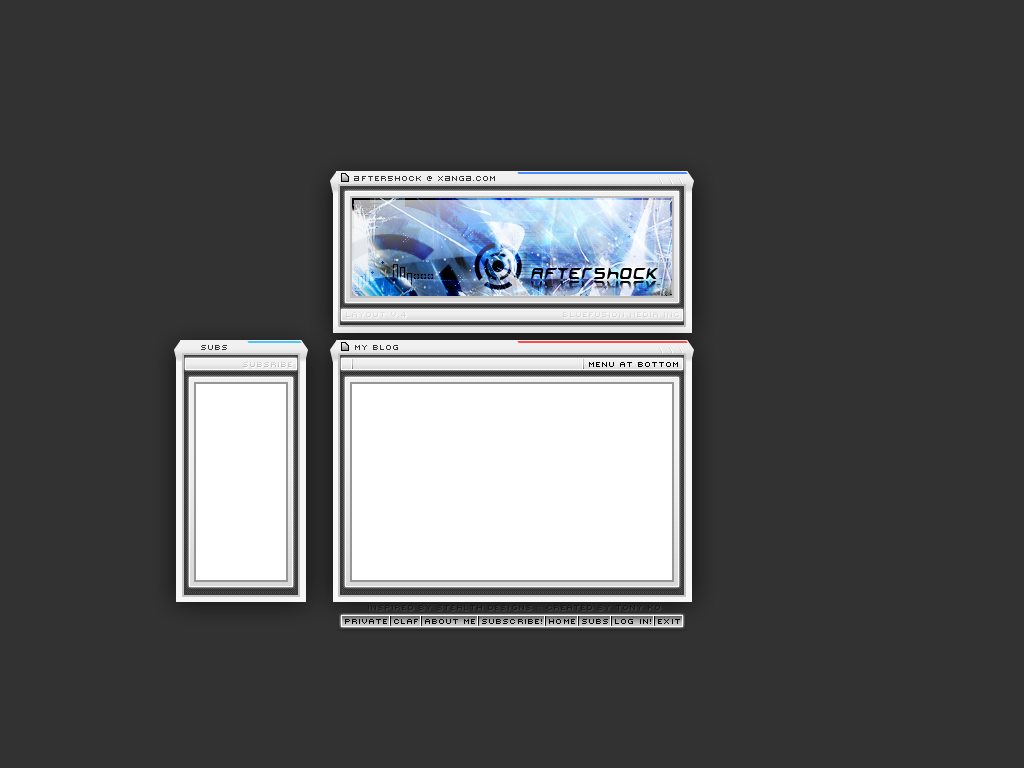
<style>
.page{position:relative;width:1024px;height:768px;background:#333232}
.page>*{position:absolute;margin:0}
.t1{font:10px "Mini7";letter-spacing:0.001em;color:#333232;text-transform:uppercase}
.t2{font:9px "BitLow";letter-spacing:0.1em;color:#333232;text-transform:uppercase}
.t3{font:10px "Mini7";letter-spacing:0.1em;color:#333232;text-transform:uppercase}
.t4{font:9px "BitLow";letter-spacing:0.001em;color:#333232;text-transform:uppercase}
.t5{font:24px "Miniskip";letter-spacing:0.001em;color:#000000;text-transform:uppercase}
.t6{font:24px "Miniskip";letter-spacing:0.001em;text-transform:uppercase}
.t7{font:10px "Mini7";letter-spacing:0.001em;color:#dddddd;text-transform:uppercase}
.t8{font:10px "Mini7";letter-spacing:0.001em;color:#cccccc;text-transform:uppercase}
.t9{font:10px "Mini7";letter-spacing:0.001em;color:#000000;text-transform:uppercase}
.t10{font:10px "Mini7";letter-spacing:0.001em;color:#181818;text-transform:uppercase}
</style>
<div class="page">
<p class="t1" style="left:354px;top:176px;width:141px;height:5px"><span class="t2">A</span>fter5hock @ <span class="t3">x</span><span class="t4">a</span>n<span class="t3">g</span><span class="t4">a</span>.COM</p>
<p class="t5" style="left:531px;top:268px;width:127px;height:11px">after5hock</p>
<p class="t6" style="left:531px;top:281px;width:127px;height:11px">after5hock</p>
<p class="t7" style="left:346px;top:312px;width:60px;height:5px">LAYOUT V.4</p>
<p class="t7" style="left:563px;top:312px;width:116px;height:5px">BLUEFU5ION MEDIA inc</p>
<p class="t1" style="left:201px;top:345px;width:26px;height:5px">subs</p>
<p class="t1" style="left:355px;top:345px;width:43px;height:5px">mY blOG</p>
<p class="t8" style="left:243px;top:362px;width:49px;height:5px">subsribe</p>
<p class="t8" style="left:243px;top:362px;width:49px;height:5px">subsribe</p>
<p class="t9" style="left:589px;top:362px;width:89px;height:5px">Menu at Bottom</p>
<p class="t10" style="left:368px;top:605px;width:292px;height:5px">InSPIRED BY STEALTH DESIGNs :: Created by Tony Ko</p>
<p class="t9" style="left:345px;top:619px;width:42px;height:5px">private</p>
<p class="t9" style="left:345px;top:619px;width:42px;height:5px">private</p>
<p class="t9" style="left:394px;top:619px;width:24px;height:5px">claf</p>
<p class="t9" style="left:394px;top:619px;width:24px;height:5px">claf</p>
<p class="t9" style="left:425px;top:619px;width:50px;height:5px">about me</p>
<p class="t9" style="left:425px;top:619px;width:50px;height:5px">about me</p>
<p class="t9" style="left:482px;top:619px;width:60px;height:5px">SUBScRIBE!</p>
<p class="t9" style="left:482px;top:619px;width:60px;height:5px">SUBScRIBE!</p>
<p class="t9" style="left:549px;top:619px;width:26px;height:5px">home</p>
<p class="t9" style="left:549px;top:619px;width:26px;height:5px">home</p>
<p class="t9" style="left:582px;top:619px;width:26px;height:5px">subs</p>
<p class="t9" style="left:582px;top:619px;width:26px;height:5px">subs</p>
<p class="t9" style="left:615px;top:619px;width:36px;height:5px">log in!</p>
<p class="t9" style="left:615px;top:619px;width:36px;height:5px">log in!</p>
<p class="t9" style="left:658px;top:619px;width:22px;height:5px">exit</p>
<p class="t9" style="left:658px;top:619px;width:22px;height:5px">exit</p>
</div>
